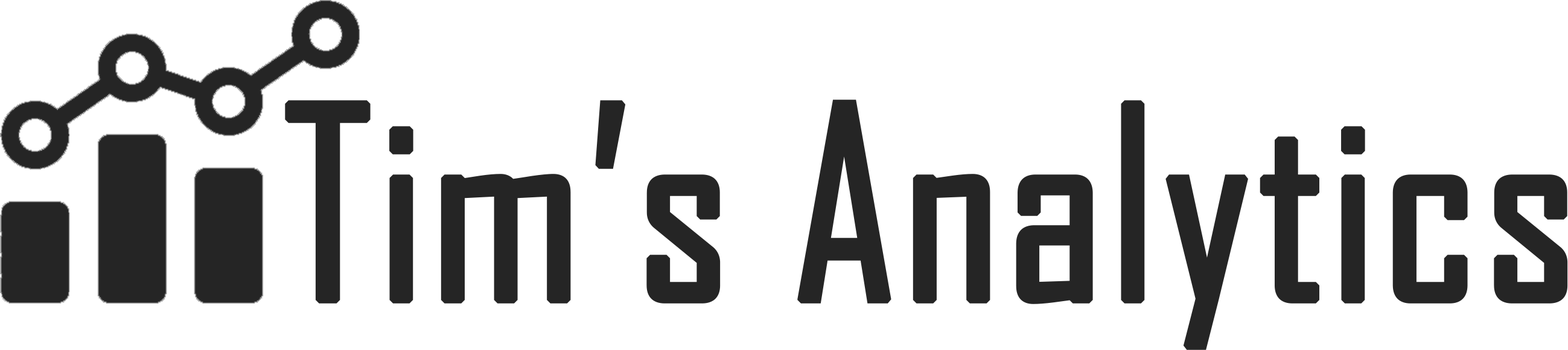
<style>
.page{position:relative;width:1568px;height:350px;background:#ffffff}
.page>*{position:absolute;margin:0}
.t1{font:256.5px "AgencyFB-Reg";color:#252525;font-weight:bold}
</style>
<div class="page">
<p class="t1" style="left:285px;top:100px;width:1283px;height:250px">Tim’s Analytics</p>
</div>
